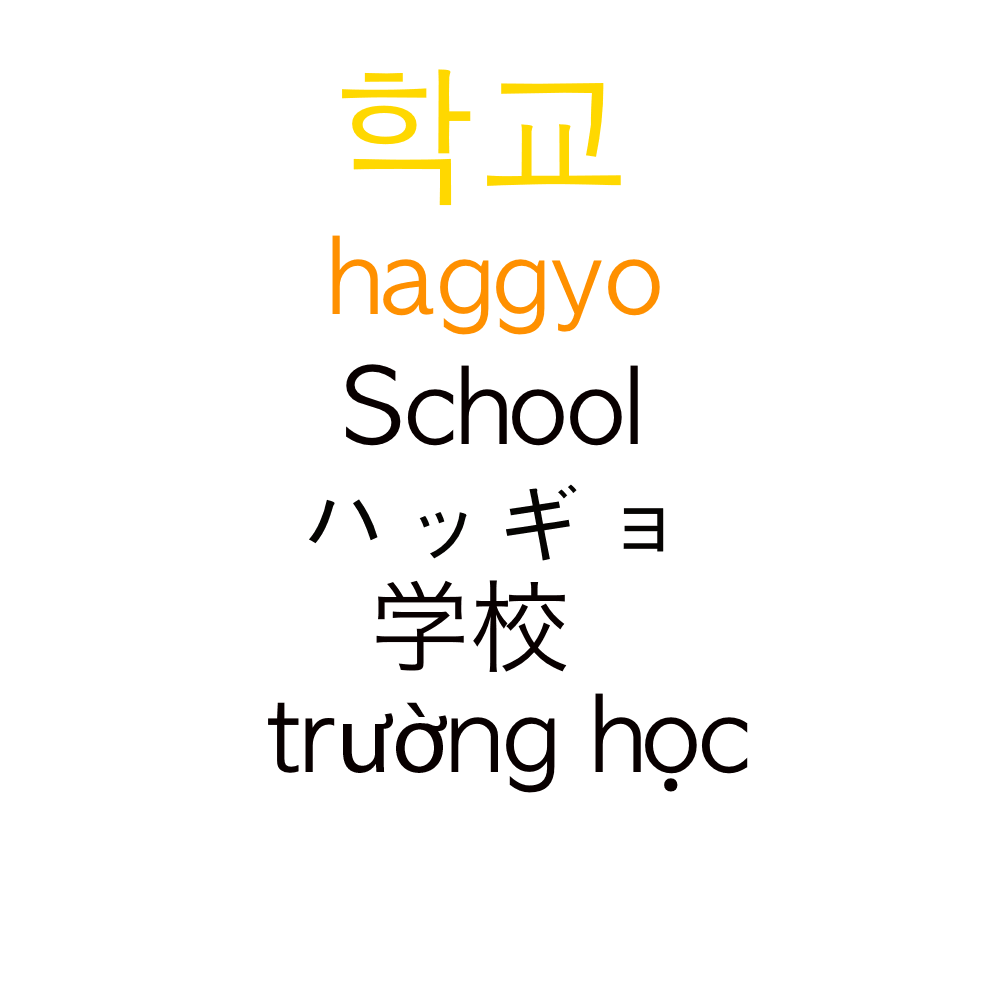
<style>
.page{position:relative;width:1000px;height:1000px;background:#ffffff}
.page>*{position:absolute;margin:0}
.t1{font:150px "AppleGothic";color:#ffd800}
.t2{font:100px "AppleGothic";color:#ff9000}
.t3{font:100px "AppleGothic";color:#080000}
.t4{font:100px "AppleGothic";color:#050402}
.t5{font:100px "HiraKakuProN-W3";color:#080000}
.t6{font:100px "MyriadPro-Regular";color:#080000}
</style>
<div class="page">
<p class="t1" style="left:342px;top:69px;width:279px;height:137px">학교</p>
<p class="t2" style="left:332px;top:235px;width:328px;height:100px">haggyo</p>
<p class="t3" style="left:346px;top:364px;width:292px;height:82px">School</p>
<p class="t4" style="left:309px;top:484px;width:355px;height:77px"><span class="t1"><br>  </span>ハッギョ</p>
<p class="t5" style="left:376px;top:580px;width:191px;height:92px">学校</p>
<p class="t3" style="left:268px;top:693px;width:480px;height:100px">tr<span class="t6">ườ</span>ng học</p>
</div>
